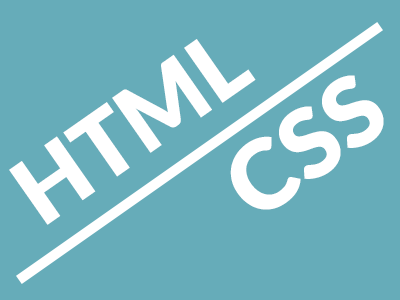
<style>
.page{position:relative;width:400px;height:300px;background:#66acb9}
.page>*{position:absolute;margin:0}
.t1{font:91.7px "Lato-Black";letter-spacing:0.01em;color:#ffffff}
.t2{font:95.6px "Lato-Black";letter-spacing:0.01em;color:#ffffff}
</style>
<div class="page">
<p class="t1" style="left:9px;top:39px;width:247px;height:186px;rotate:-35deg">HTML</p>
<p class="t2" style="left:230px;top:75px;width:154px;height:135px;rotate:-36deg">CSS</p>
</div>
